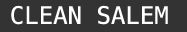
<style>
.page{position:relative;width:187px;height:32px;background:#333333}
.page>*{position:absolute;margin:0}
.t1{font:24px "DejaVuSansMono";color:#ffffff}
</style>
<div class="page">
<p class="t1" style="left:11px;top:5px;width:157px;height:20px">CLEAN SALEM</p>
</div>
